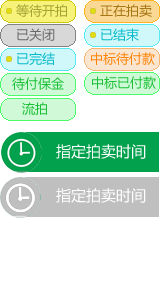
<style>
.page{position:relative;width:160px;height:300px;background:#ffffff}
.page>*{position:absolute;margin:0}
.t1{font:13px "MicrosoftYaHei";color:#a5a236;text-transform:uppercase}
.t2{font:13px "MicrosoftYaHei";color:#a57816;text-transform:uppercase}
.t3{font:13px "MicrosoftYaHei";color:#686867;text-transform:uppercase}
.t4{font:13px "MicrosoftYaHei";color:#06bbc9;text-transform:uppercase}
.t5{font:13px "MicrosoftYaHei";color:#fd8409;text-transform:uppercase}
.t6{font:13px "MicrosoftYaHei";color:#1cc037;text-transform:uppercase}
.t7{font:15px "MicrosoftYaHei";color:#ffffff;text-transform:uppercase}
</style>
<div class="page">
<p class="t1" style="left:16px;top:4px;width:51px;height:13px">等待开拍</p>
<p class="t2" style="left:100px;top:4px;width:52px;height:13px">正在拍卖</p>
<p class="t3" style="left:17px;top:28px;width:38px;height:13px">已关闭</p>
<p class="t4" style="left:101px;top:28px;width:38px;height:13px">已结束</p>
<p class="t4" style="left:17px;top:52px;width:38px;height:13px">已完结</p>
<p class="t5" style="left:91px;top:52px;width:64px;height:13px">中标待付款</p>
<p class="t6" style="left:12px;top:77px;width:52px;height:13px">待付保金</p>
<p class="t6" style="left:92px;top:76px;width:64px;height:13px">中标已付款</p>
<p class="t6" style="left:22px;top:102px;width:25px;height:13px">流拍</p>
<p class="t7" style="left:56px;top:144px;width:90px;height:15px">指定拍卖时间</p>
<p class="t7" style="left:56px;top:188px;width:90px;height:15px">指定拍卖时间</p>
</div>
